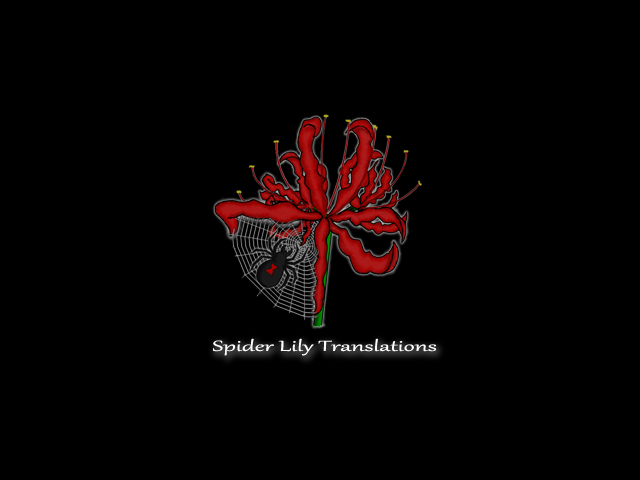
<style>
.page{position:relative;width:640px;height:480px;background:#000000}
.page>*{position:absolute;margin:0}
.t1{font:18px "Gabriola";color:#ffffff;scale:1.71 1}
</style>
<div class="page">
<p class="t1" style="left:213px;top:338px;width:224px;height:18px">Spider Lily Translations</p>
</div>
